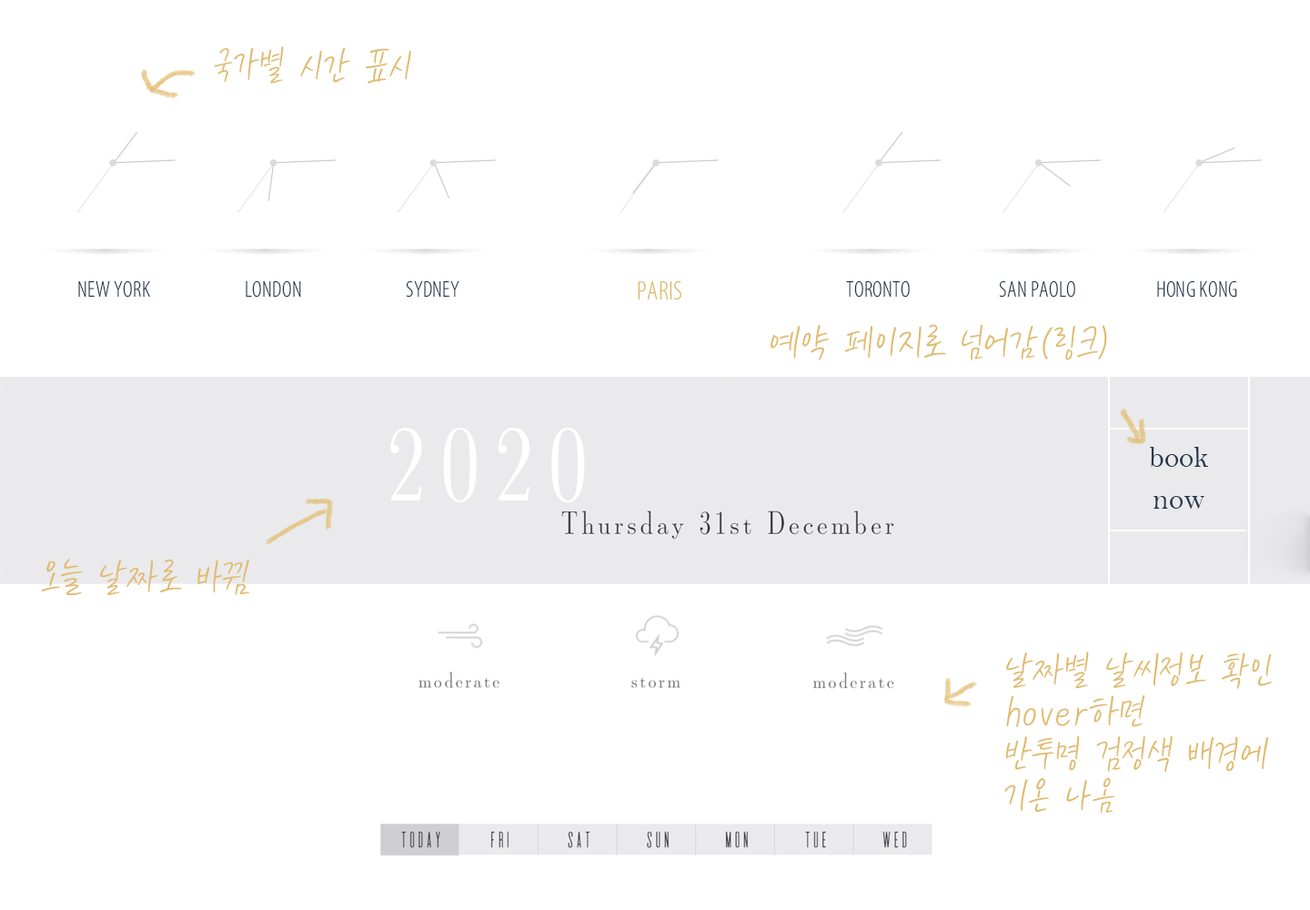
<style>
.page{position:relative;width:1310px;height:910px;background:#ffffff}
.page>*{position:absolute;margin:0}
.t1{font:45.5px "KCC-eunyoung-Regular";letter-spacing:0.01em;color:#e0bb6d}
.t2{font:22.7px "MyriadVariableConcept-Roman";letter-spacing:0.01em;color:#27374d}
.t3{font:26.5px "MyriadVariableConcept-Roman";letter-spacing:0.01em;color:#e0bb6d}
.t4{font:10.9px/41.7px "KCC-eunyoung-Regular";letter-spacing:0.01em;color:#e0bb6d}
.t5{font:30.3px/41.7px "BellMT";color:#27374d}
</style>
<div class="page">
<p class="t1" style="left:214px;top:46px;width:197px;height:38px">국가별 시간 표시</p>
<p class="t2" style="left:78px;top:280px;width:72px;height:18px">NEW YORK</p>
<p class="t2" style="left:246px;top:280px;width:55px;height:18px">LONDON</p>
<p class="t2" style="left:406px;top:280px;width:54px;height:18px">SYDNEY</p>
<p class="t3" style="left:638px;top:281px;width:44px;height:19px">PARIS</p>
<p class="t2" style="left:846px;top:280px;width:64px;height:18px">TORONTO</p>
<p class="t2" style="left:999px;top:280px;width:77px;height:18px">SAN PAOLO</p>
<p class="t2" style="left:1158px;top:280px;width:80px;height:18px">HONG KONG</p>
<p class="t4" style="left:771px;top:324px;width:336px;height:36px">예약 페이지로 넘어감(링크)</p>
<p class="t5" style="left:1150px;top:447px;width:59px;height:62px;text-align:center">book<br>now</p>
<p class="t4" style="left:41px;top:559px;width:209px;height:37px">오늘 날짜로 바뀜</p>
<p class="t4" style="left:1005px;top:652px;width:267px;height:162px">날짜별 날씨정보 확인<br>hover하면<br>반투명 검정색 배경에<br>기온 나옴</p>
</div>
